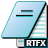
<style>
.page{position:relative;width:48px;height:48px;background:#ffffff}
.page>*{position:absolute;margin:0}
.t1{font:7.5px "Ubuntu-Bold";color:#ffffff}
</style>
<div class="page">
<p class="t1" style="left:26px;top:40px;width:20px;height:6px">RTFX</p>
</div>
